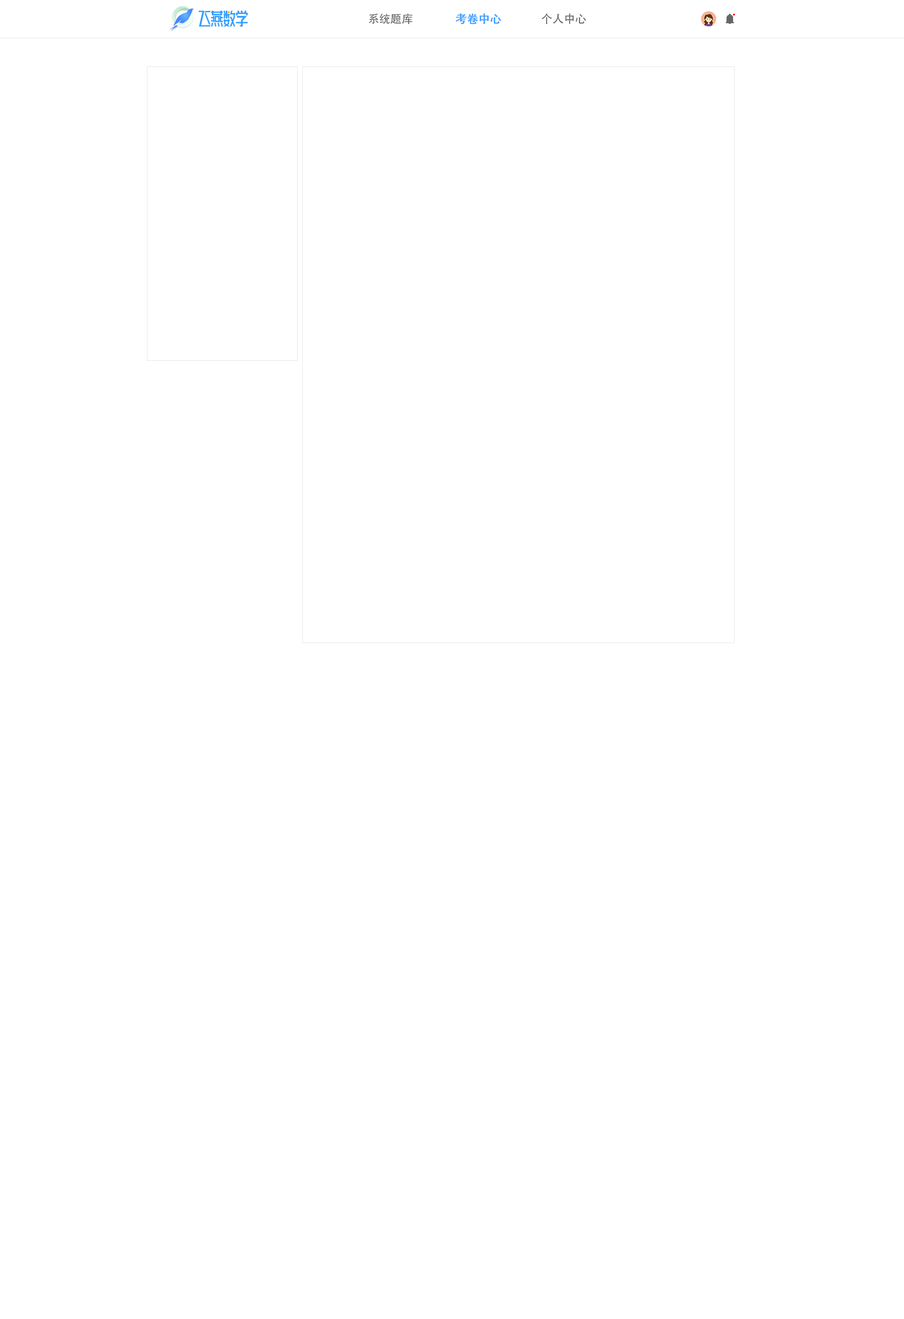
<style>
.page{position:relative;width:904px;height:1319px;background:#ffffff}
.page>*{position:absolute;margin:0}
.t1{font:11.3px "AdobeHeitiStd-Regular";color:#666666}
.t2{font:11.3px "AdobeHeitiStd-Regular";color:#409eff;font-weight:bold}
</style>
<div class="page">
<p class="t1" style="left:369px;top:14px;width:44px;height:10px">系统题库</p>
<p class="t2" style="left:455px;top:13px;width:47px;height:11px">考卷中心</p>
<p class="t1" style="left:542px;top:13px;width:44px;height:11px">个人中心</p>
</div>
